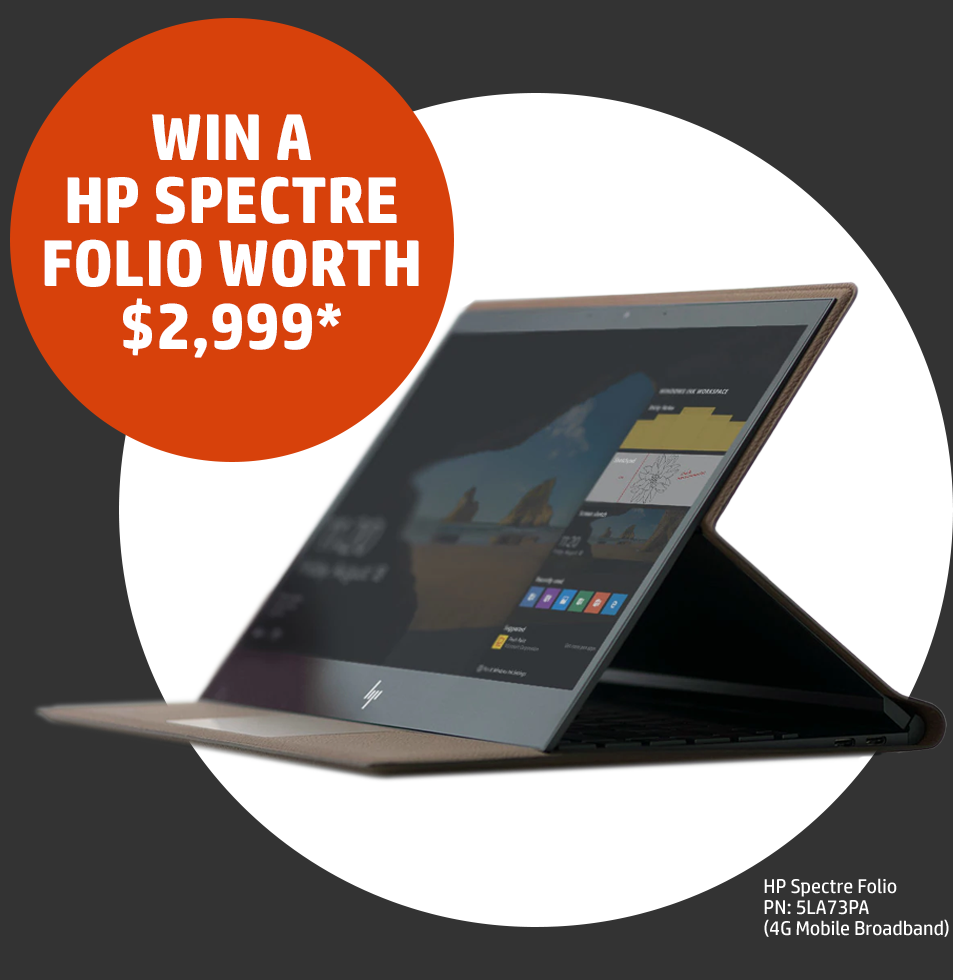
<style>
.page{position:relative;width:953px;height:980px;background:#333333}
.page>*{position:absolute;margin:0}
.t1{font:65.4px/63px "HPSimplified-Bold";color:#ffffff}
.t2{font:20px/21px "HPSimplified-Regular";color:#ffffff}
</style>
<div class="page">
<p class="t1" style="left:44px;top:114px;width:375px;height:244px;text-align:center">WIN A <br>HP SPECTRE <br>FOLIO WORTH <br>$2,999*</p>
<p class="t2" style="left:764px;top:878px;width:185px;height:59px">HP Spectre Folio <br>PN: 5LA73PA <br>(4G Mobile Broadband)</p>
</div>
